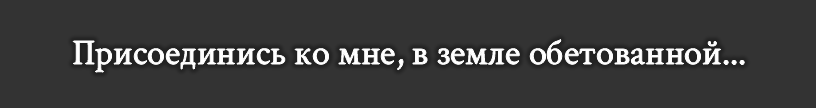
<style>
.page{position:relative;width:816px;height:108px;background:#333333}
.page>*{position:absolute;margin:0}
.t1{font:36px "CrimsonText-Regular";color:#ffffff}
</style>
<div class="page">
<p class="t1" style="left:73px;top:39px;width:672px;height:33px">Присоединись ко мне, в земле обетованной...</p>
</div>
